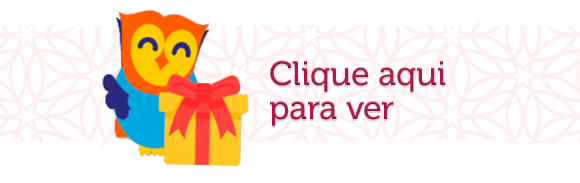
<style>
.page{position:relative;width:580px;height:183px;background:#ffffff}
.page>*{position:absolute;margin:0}
.t1{font:33.9px/34.5px "Museo500-Regular";letter-spacing:-0.01em;color:#b6154a}
</style>
<div class="page">
<p class="t1" style="left:270px;top:60px;width:176px;height:66px">Clique aqui<br>para ver</p>
</div>
